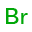
<style>
.page{position:relative;width:32px;height:32px;background:#ffffff}
.page>*{position:absolute;margin:0}
.t1{font:22px "Kalinga-Bold";color:#00a708}
</style>
<div class="page">
<p class="t1" style="left:6px;top:8px;width:22px;height:16px">Br</p>
</div>
